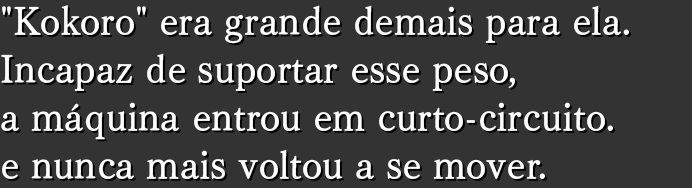
<style>
.page{position:relative;width:692px;height:188px;background:#333333}
.page>*{position:absolute;margin:0}
.t1{font:38.7px/48px "TelopMinPro-D";color:#ffffff}
</style>
<div class="page">
<p class="t1" style="left:1px;top:5px;width:628px;height:174px">"Kokoro" era grande demais para ela.<br>Incapaz de suportar esse peso,<br>a máquina entrou em curto-circuito.<br>e nunca mais voltou a se mover.</p>
</div>
